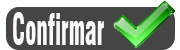
<style>
.page{position:relative;width:180px;height:50px;background:#454545}
.page>*{position:absolute;margin:0}
.t1{font:42.9px "Swiss721BT-BlackCondensed";color:#fcf8f8;scale:0.52 1}
</style>
<div class="page">
<p class="t1" style="left:13px;top:12px;width:91px;height:33px">Confirmar</p>
</div>
